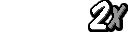
<style>
.page{position:relative;width:128px;height:32px;background:#ffffff}
.page>*{position:absolute;margin:0}
.t1{font:45px "DomDiagonalBT-Regular";letter-spacing:0.075em;color:#ffffff}
.t2{font:29.7px "DomDiagonalBT-Regular";letter-spacing:0.075em;color:#969696}
</style>
<div class="page">
<p class="t1" style="left:90px;top:1px;width:19px;height:28px">2</p>
<p class="t1" style="left:91px;top:2px;width:19px;height:28px">2</p>
<p class="t2" style="left:108px;top:5px;width:17px;height:23px">X</p>
</div>
